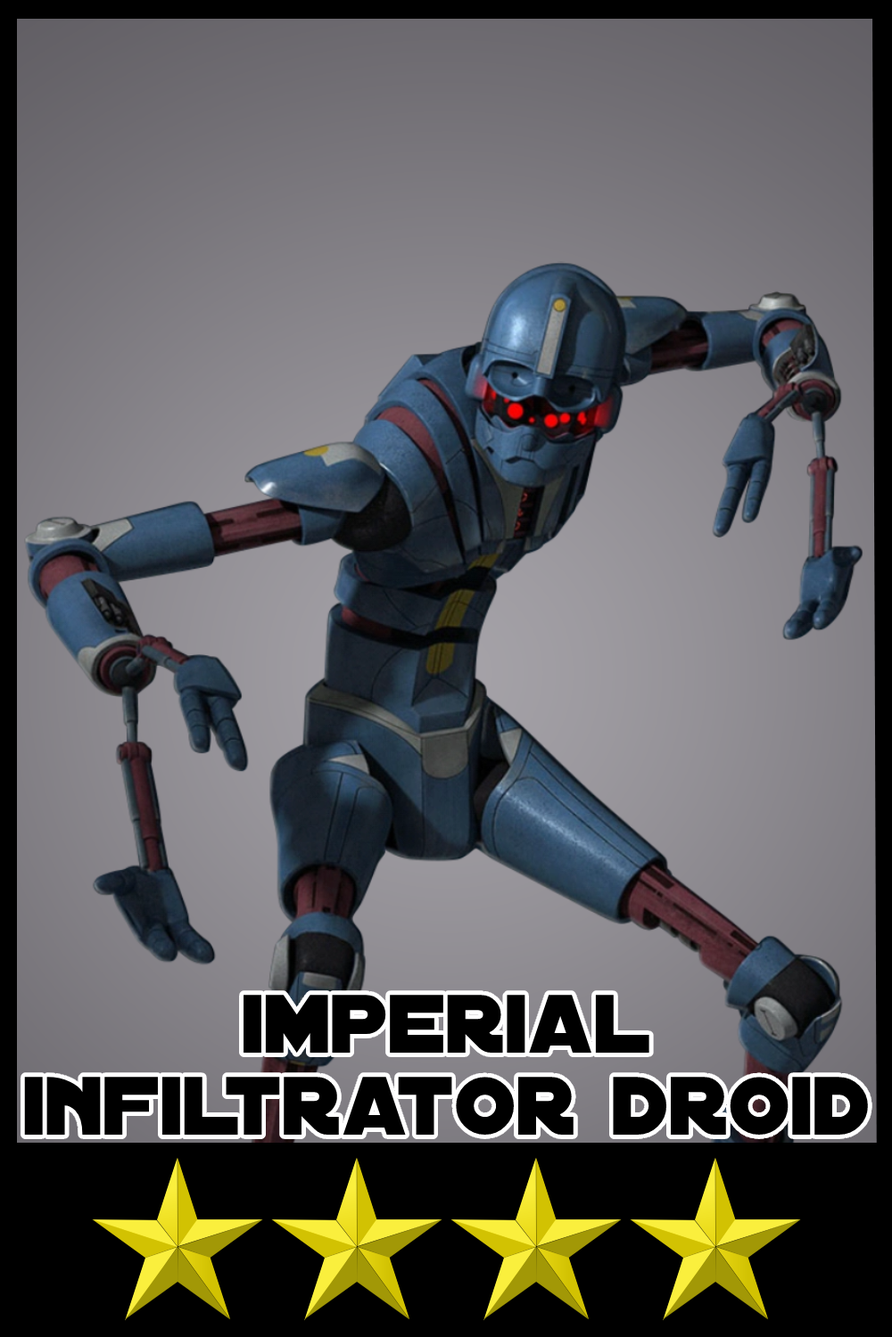
<style>
.page{position:relative;width:892px;height:1337px}
.page>*{position:absolute;margin:0}
.t1{font:88.7px/81.3px "DistantGalaxy";color:#000000}
</style>
<div class="page">
<p class="t1" style="left:24px;top:995px;width:844px;height:140px;text-align:center">imperial<br>infiltrator droid</p>
</div>
